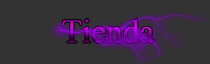
<style>
.page{position:relative;width:210px;height:64px;background:#333333}
.page>*{position:absolute;margin:0}
.t1{font:33.3px "TimesNewRomanPSMT"}
</style>
<div class="page">
<p class="t1" style="left:62px;top:19px;width:93px;height:24px">Tienda</p>
</div>
